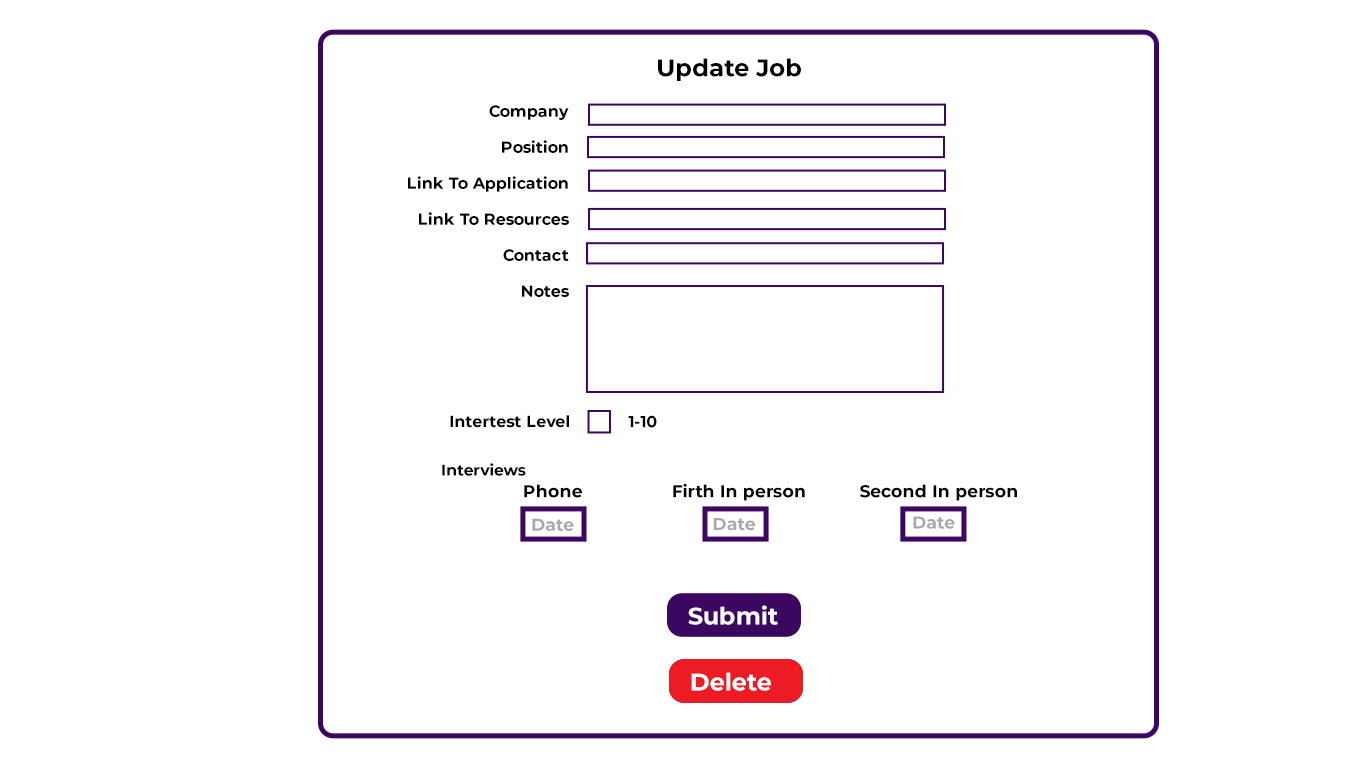
<style>
.page{position:relative;width:1366px;height:768px;background:#ffffff}
.page>*{position:absolute;margin:0}
.t1{font:24px "Montserrat-Bold";color:#000000}
.t2{font:16px/36px "Montserrat-Bold";color:#000000}
.t3{font:16px "Montserrat-Bold";color:#000000}
.t4{font:15.5px "Montserrat-Bold";color:#000000}
.t5{font:17.3px "Montserrat-Bold";color:#000000}
.t6{font:17.3px "Montserrat-Bold";color:#a9a9a9}
.t7{font:24px "Montserrat-Bold";color:#ffffff}
</style>
<div class="page">
<p class="t1" style="left:658px;top:58px;width:143px;height:23px">Update Job</p>
<p class="t2" style="left:408px;top:105px;width:161px;height:192px;text-align:right">Company<br>Position<br>Link To Application<br>Link To Resources<br>Contact<br>Notes</p>
<p class="t3" style="left:450px;top:415px;width:119px;height:13px">Intertest Level</p>
<p class="t3" style="left:628px;top:415px;width:29px;height:13px">1-10</p>
<p class="t4" style="left:442px;top:463px;width:84px;height:13px">Interviews</p>
<p class="t5" style="left:524px;top:483px;width:493px;height:18px">Phone            Firth In person    Second In person</p>
<p class="t6" style="left:532px;top:518px;width:42px;height:13px">Date</p>
<p class="t6" style="left:713px;top:518px;width:42px;height:13px">Date</p>
<p class="t6" style="left:913px;top:516px;width:42px;height:13px">Date</p>
<p class="t7" style="left:688px;top:605px;width:90px;height:20px">Submit</p>
<p class="t7" style="left:691px;top:672px;width:80px;height:19px">Delete</p>
</div>
